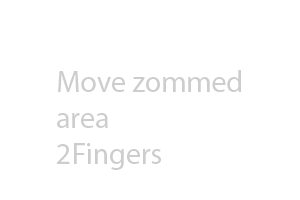
<style>
.page{position:relative;width:300px;height:200px;background:#ffffff}
.page>*{position:absolute;margin:0}
.t1{font:30px "MyriadPro-Regular";color:#cdcdcd}
</style>
<div class="page">
<p class="t1" style="left:57px;top:70px;width:184px;height:100px">Move zommed<br>area<br>2Fingers</p>
</div>
